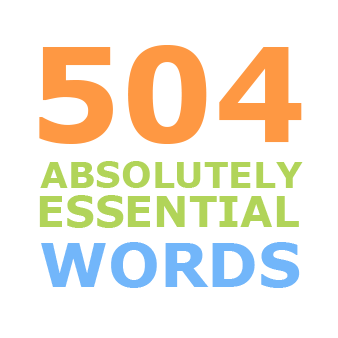
<style>
.page{position:relative;width:338px;height:338px;background:#ffffff}
.page>*{position:absolute;margin:0}
.t1{font:130px "Verdana-Bold";color:#fe9843}
.t2{font:36px "Verdana-Bold";color:#b1d459}
.t3{font:42px "Verdana-Bold";color:#b1d459}
.t4{font:61px "Verdana-Bold";color:#72b6fa}
</style>
<div class="page">
<p class="t1" style="left:39px;top:45px;width:263px;height:99px">504</p>
<p class="t2" style="left:40px;top:161px;width:263px;height:27px">ABSOLUTELY</p>
<p class="t3" style="left:39px;top:195px;width:260px;height:33px">ESSENTIAL</p>
<p class="t4" style="left:41px;top:242px;width:259px;height:46px">WORDS</p>
</div>
